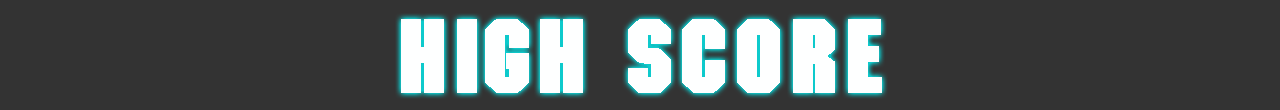
<style>
.page{position:relative;width:1280px;height:110px;background:#333333}
.page>*{position:absolute;margin:0}
.t1{font:100px "MotorPlain";letter-spacing:0.05em;color:#feffff;font-weight:bold}
</style>
<div class="page">
<p class="t1" style="left:401px;top:19px;width:481px;height:74px">High SCORE</p>
</div>
